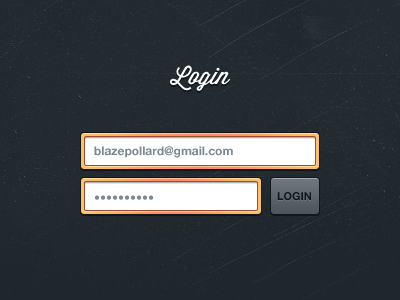
<style>
.page{position:relative;width:400px;height:300px}
.page>*{position:absolute;margin:0}
.t1{font:24px "WisdomScriptAI";color:#ffffff}
.t2{font:12px "HelveticaNeue-Bold";color:#7d8992}
.t3{font:11px "HelveticaNeue-Bold";color:#11161a}
</style>
<div class="page">
<p class="t1" style="left:170px;top:65px;width:61px;height:26px">Login</p>
<p class="t2" style="left:94px;top:146px;width:139px;height:12px">blazepollard@gmail.com</p>
<p class="t2" style="left:94px;top:195px;width:60px;height:5px">••••••••••</p>
<p class="t3" style="left:277px;top:192px;width:34px;height:9px">LOGIN</p>
</div>
